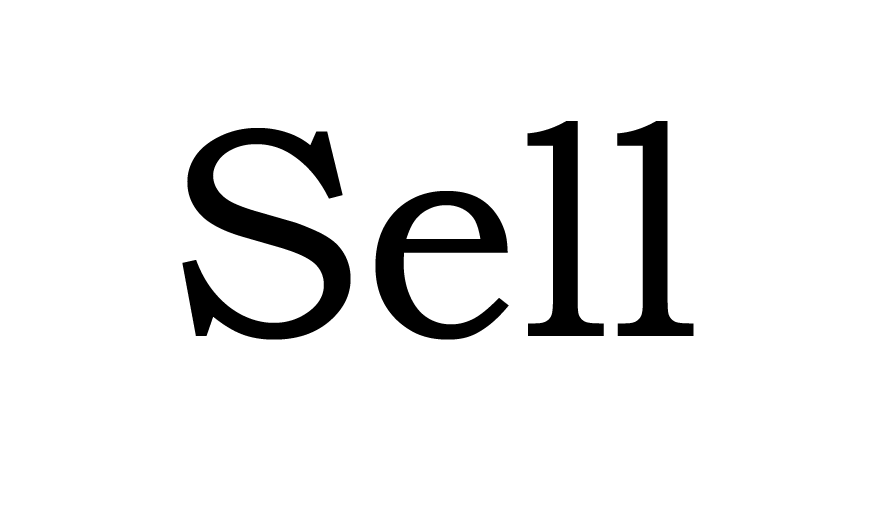
<style>
.page{position:relative;width:875px;height:512px;background:#ffffff}
.page>*{position:absolute;margin:0}
.t1{font:300px "BookmanOldStyle";color:#000000}
</style>
<div class="page">
<p class="t1" style="left:182px;top:121px;width:512px;height:219px">Sell</p>
</div>
